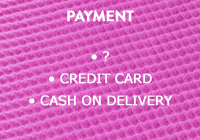
<style>
.page{position:relative;width:200px;height:140px}
.page>*{position:absolute;margin:0}
.t1{font:15px "BrandonGrotesque-Bold";letter-spacing:-0.02em;color:#ffffff;font-weight:bold}
.t2{font:13px/22px "Verdana";letter-spacing:-0.02em;color:#ffffff;font-weight:bold}
</style>
<div class="page">
<p class="t1" style="left:67px;top:10px;width:67px;height:12px">PAYMENT</p>
<p class="t2" style="left:29px;top:51px;width:144px;height:55px;text-align:center">• ?<br>• CREDIT CARD<br>• CASH ON DELIVERY</p>
</div>
